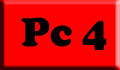
<style>
.page{position:relative;width:120px;height:70px;background:#ff0000}
.page>*{position:absolute;margin:0}
.t1{font:42.3px "CooperBlack";color:#000000}
</style>
<div class="page">
<p class="t1" style="left:21px;top:17px;width:86px;height:33px">Pc 4</p>
</div>
